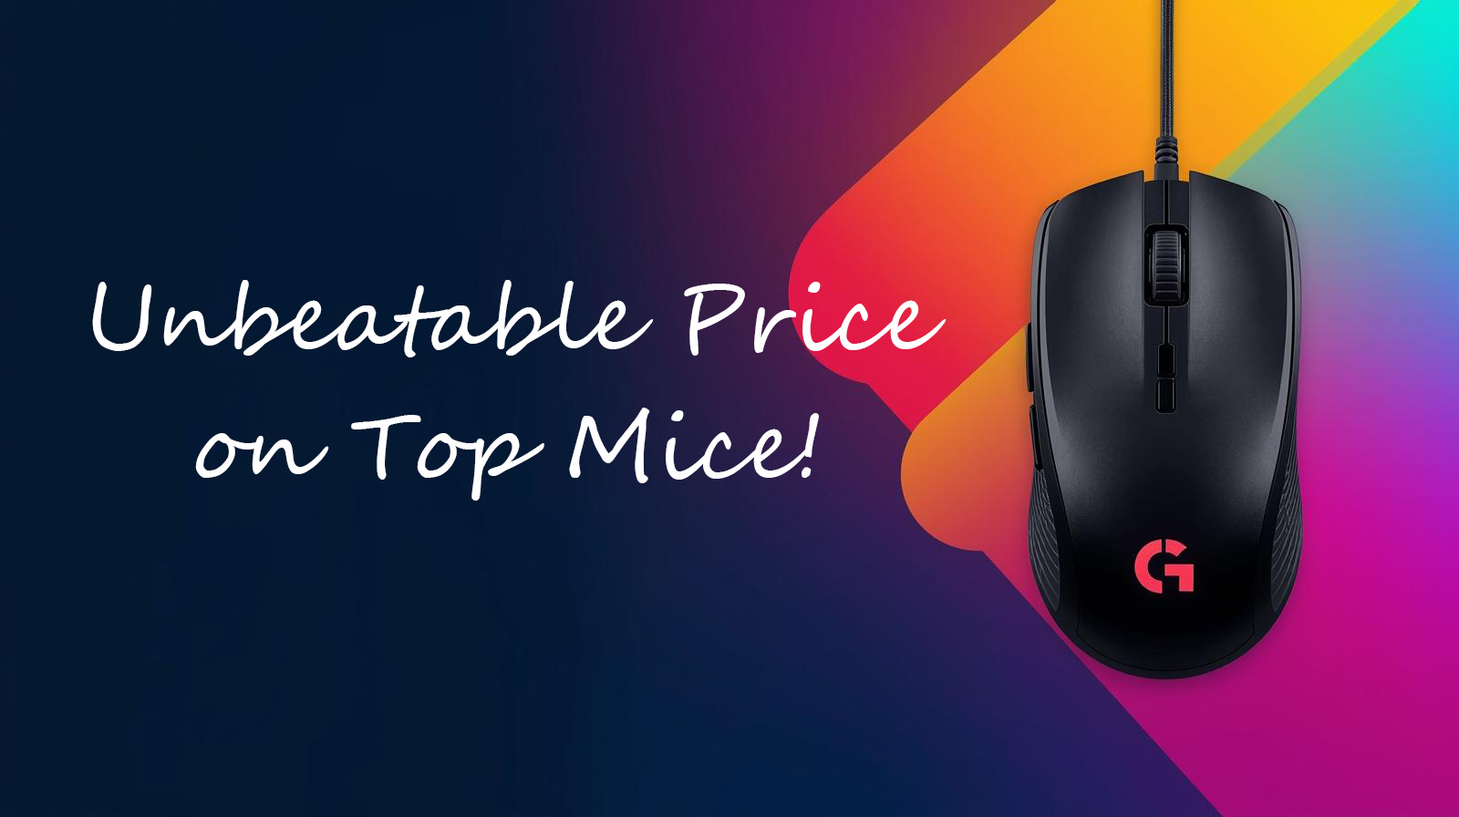
<style>
.page{position:relative;width:1459px;height:817px}
.page>*{position:absolute;margin:0}
.t1{font:91.2px "SegoeScript";color:#fefefe}
</style>
<div class="page">
<p class="t1" style="left:92px;top:280px;width:855px;height:221px;text-align:center">Unbeatable Price <br><br>on Top Mice!</p>
</div>
